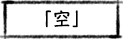
<style>
.page{position:relative;width:123px;height:39px;background:#ffffff}
.page>*{position:absolute;margin:0}
.t1{font:18px "HannotateSC-W7";letter-spacing:0.055em;color:#000000}
</style>
<div class="page">
<p class="t1" style="left:45px;top:10px;width:33px;height:18px">「空」</p>
</div>
